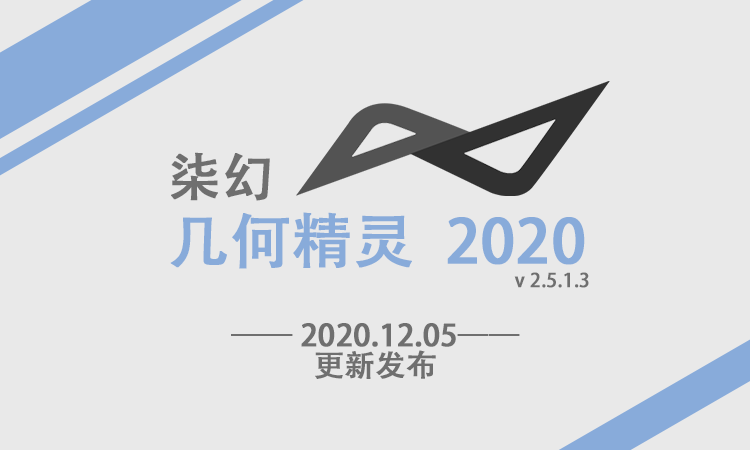
<style>
.page{position:relative;width:750px;height:450px;background:#e9e9e9}
.page>*{position:absolute;margin:0}
.t1{font:60px/60px "AdobeHeitiStd-Regular";color:#88abda;font-weight:bold}
.t2{font:52px/60px "AdobeHeitiStd-Regular";color:#6f6f6f;font-weight:bold}
.t3{font:19px/60px "AdobeHeitiStd-Regular";color:#6f6f6f;font-weight:bold}
.t4{font:30px/30px "AdobeHeitiStd-Regular";color:#6f6f6f;font-weight:bold}
</style>
<div class="page">
<p class="t1" style="left:170px;top:152px;width:419px;height:136px"><span class="t2">柒幻<br></span>几何精灵  2020<br><span class="t3">v 2.5.1.3</span></p>
<p class="t4" style="left:231px;top:323px;width:289px;height:56px;text-align:center">—— 2020.12.05——<br>更新发布</p>
</div>
